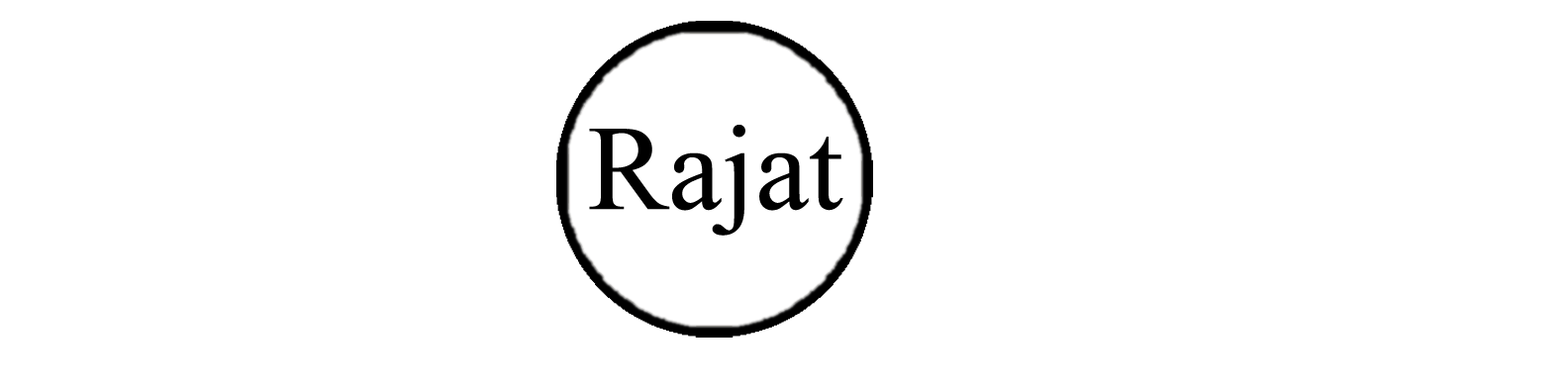
<style>
.page{position:relative;width:1568px;height:392px;background:#ffffff}
.page>*{position:absolute;margin:0}
.t1{font:120.9px "TimesNewRomanPSMT";color:#000000}
</style>
<div class="page">
<p class="t1" style="left:589px;top:125px;width:254px;height:111px">Rajat</p>
</div>
